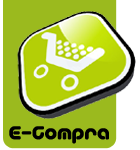
<style>
.page{position:relative;width:140px;height:150px;background:#9bba1e}
.page>*{position:absolute;margin:0}
.t1{font:18.9px "Teacher_A";letter-spacing:-0.025em;color:#000000;font-weight:bold}
</style>
<div class="page">
<p class="t1" style="left:9px;top:126px;width:100px;height:18px">E-Compra</p>
</div>
